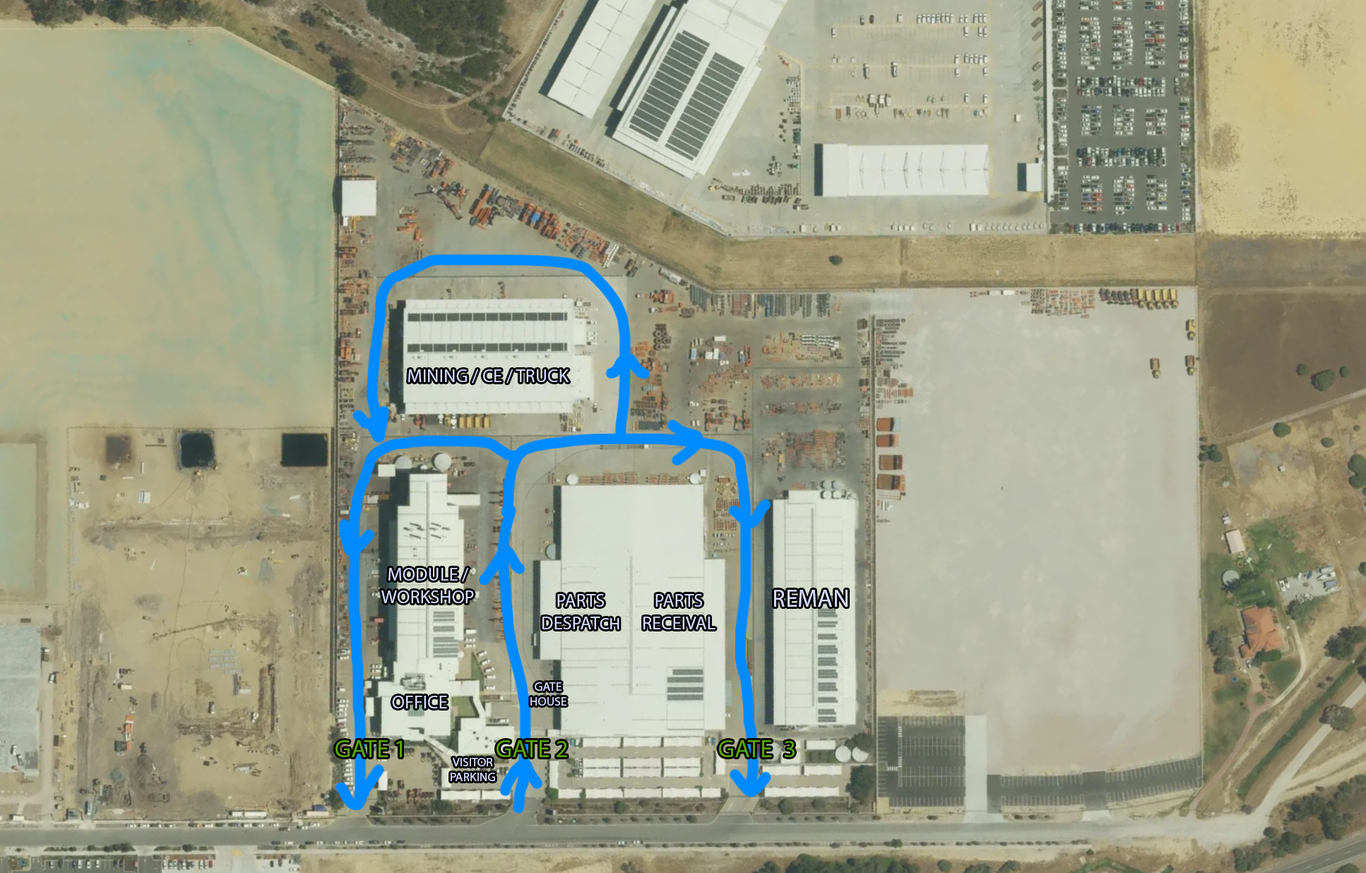
<style>
.page{position:relative;width:1366px;height:873px}
.page>*{position:absolute;margin:0}
.t1{font:18.7px "MyriadPro-Regular";color:#d4daff}
.t2{font:16.6px "MyriadPro-Regular";color:#d4daff}
.t3{font:25px "MyriadPro-Regular";color:#d4daff}
.t4{font:12.5px "MyriadPro-Regular";color:#d4daff}
.t5{font:25px "MyriadPro-Regular";color:#5da400}
</style>
<div class="page">
<p class="t1" style="left:408px;top:369px;width:161px;height:15px">MINING / CE / TRUCK</p>
<p class="t1" style="left:381px;top:568px;width:93px;height:35px;text-align:center">MODULE / <br>WORKSHOP</p>
<p class="t1" style="left:542px;top:594px;width:77px;height:35px;text-align:center">PARTS<br>DESPAT<span class="t2">CH</span></p>
<p class="t1" style="left:643px;top:594px;width:72px;height:35px;text-align:center">PARTS<br>RECEIVAL</p>
<p class="t3" style="left:774px;top:590px;width:74px;height:17px">REMAN</p>
<p class="t4" style="left:530px;top:682px;width:36px;height:24px;text-align:center">GATE <br>HOUSE</p>
<p class="t1" style="left:392px;top:696px;width:55px;height:12px">OFFICE</p>
<p class="t5" style="left:335px;top:740px;width:67px;height:17px">GATE 1</p>
<p class="t5" style="left:497px;top:740px;width:70px;height:17px">GATE 2</p>
<p class="t5" style="left:719px;top:740px;width:76px;height:17px">GATE  3</p>
<p class="t4" style="left:451px;top:758px;width:44px;height:23px;text-align:center">VISITOR<br>PARKING</p>
</div>
